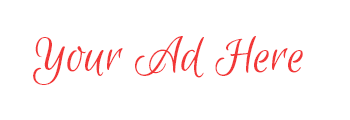
<style>
.page{position:relative;width:350px;height:120px;background:#ffffff}
.page>*{position:absolute;margin:0}
.t1{font:55px "EuphoriaScript-Regular";color:#f23737}
</style>
<div class="page">
<p class="t1" style="left:33px;top:36px;width:270px;height:49px">Your Ad Here</p>
</div>
